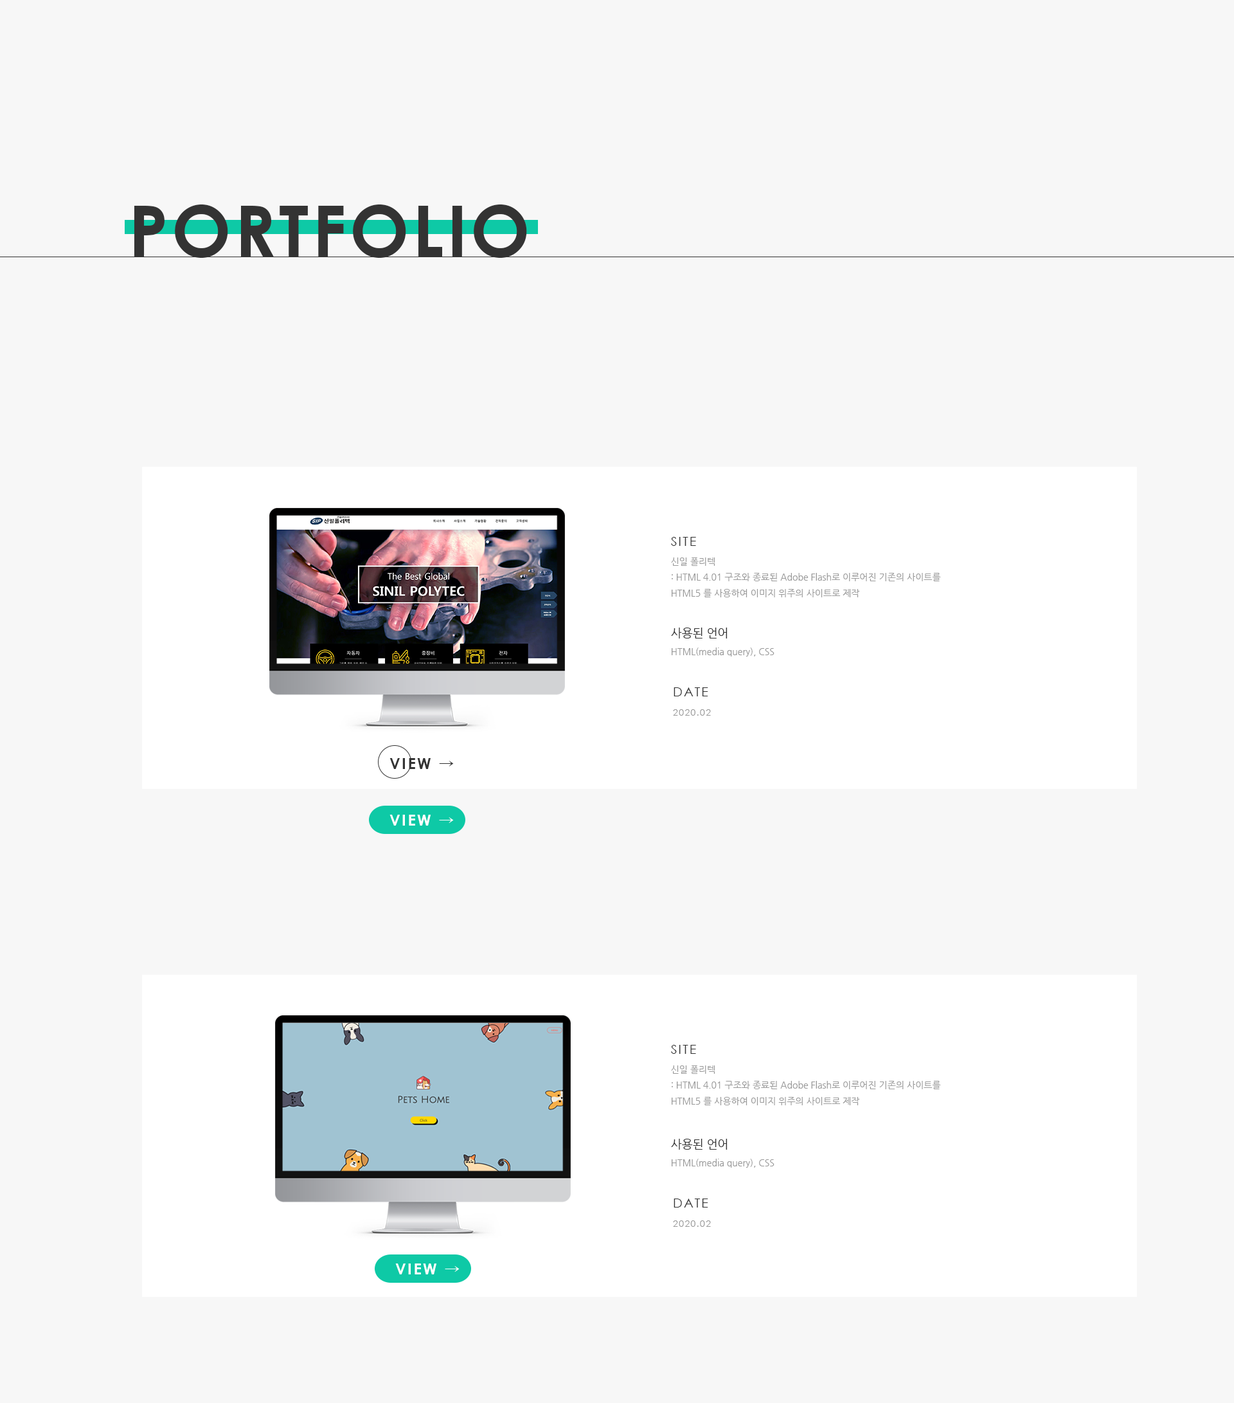
<style>
.page{position:relative;width:1234px;height:1403px;background:#f7f7f7}
.page>*{position:absolute;margin:0}
.t1{font:70.7px "CenturyGothic-Bold";letter-spacing:0.05em;color:#333333;text-transform:uppercase}
.t2{font:9px "NanumGothic";color:#999999}
.t3{font:12.9px "CenturyGothic";letter-spacing:0.1em;color:#333333}
.t4{font:11.6px "NanumGothic";color:#333333}
.t5{font:9px "CenturyGothic";letter-spacing:0.1em;color:#999999}
.t6{font:15.4px "CenturyGothic-Bold";letter-spacing:0.1em;color:#333333}
.t7{font:15.4px "Gulim";letter-spacing:0.1em;color:#333333}
.t8{font:15.4px "CenturyGothic-Bold";letter-spacing:0.1em;color:#ffffff}
.t9{font:15.4px "Gulim";letter-spacing:0.1em;color:#ffffff}
</style>
<div class="page">
<p class="t1" style="left:134px;top:204px;width:393px;height:54px">portfolio</p>
<p class="t2" style="left:671px;top:537px;width:270px;height:61px"><span class="t3">SITE<br></span>신일 폴리텍<br>: HTML 4.01 구조와 종료된 Adobe Flash로 이루어진 기존의 사이트를<br>HTML5 를 사용하여 이미지 위주의 사이트로 제작</p>
<p class="t2" style="left:671px;top:627px;width:104px;height:29px"><span class="t4">사용된 언어<br></span>HTML(media query), CSS</p>
<p class="t5" style="left:673px;top:687px;width:38px;height:29px"><span class="t3">DATE<br></span>2020.02</p>
<p class="t6" style="left:390px;top:758px;width:64px;height:11px">VIEW <span class="t7">→</span></p>
<p class="t8" style="left:390px;top:815px;width:64px;height:10px">VIEW <span class="t9">→</span></p>
<p class="t2" style="left:671px;top:1045px;width:270px;height:61px"><span class="t3">SITE<br></span>신일 폴리텍<br>: HTML 4.01 구조와 종료된 Adobe Flash로 이루어진 기존의 사이트를<br>HTML5 를 사용하여 이미지 위주의 사이트로 제작</p>
<p class="t2" style="left:671px;top:1138px;width:104px;height:29px"><span class="t4">사용된 언어<br></span>HTML(media query), CSS</p>
<p class="t5" style="left:673px;top:1198px;width:38px;height:29px"><span class="t3">DATE<br></span>2020.02</p>
<p class="t8" style="left:395px;top:1263px;width:65px;height:11px">VIEW <span class="t9">→</span></p>
</div>
